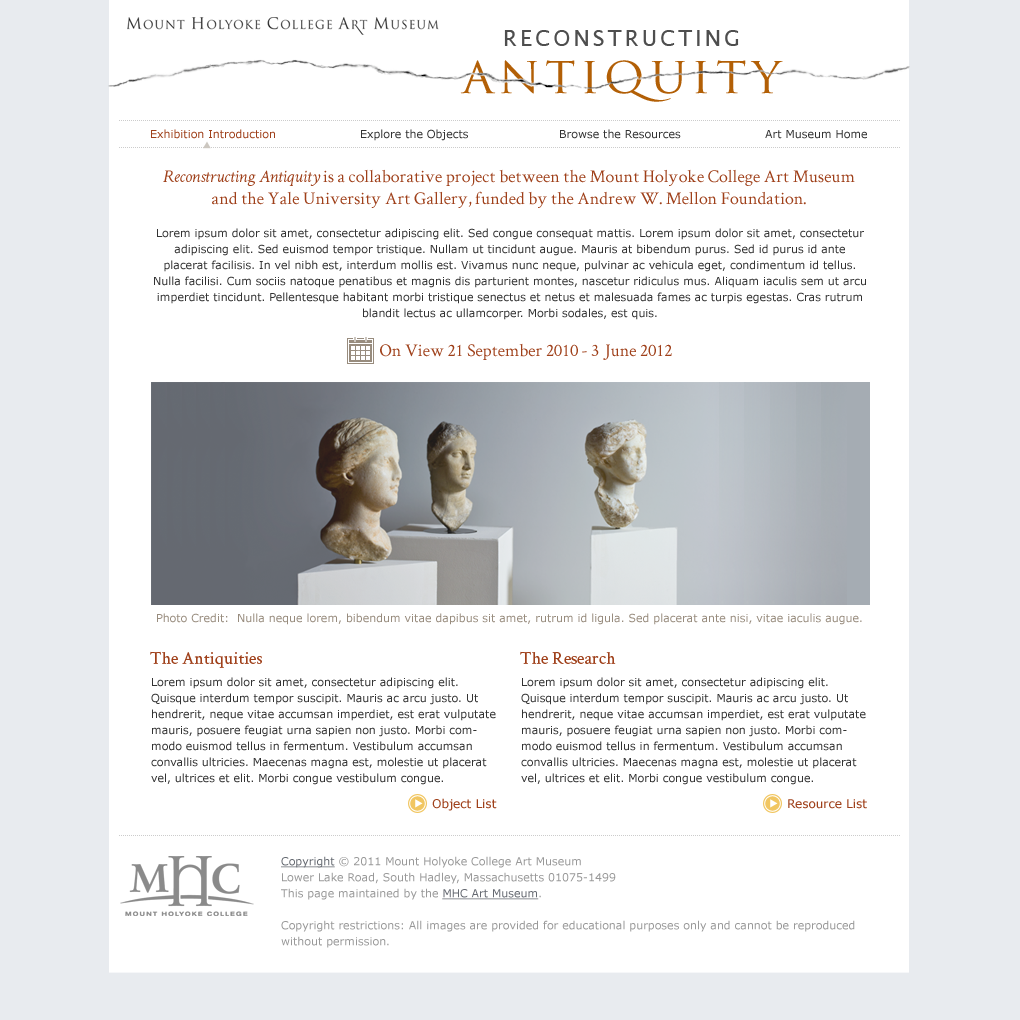
<style>
.page{position:relative;width:1020px;height:1020px;background:#ffffff}
.page>*{position:absolute;margin:0}
.t1{font:22px "LucidaSans";letter-spacing:0.14em;color:#4e4e4e;text-transform:uppercase}
.t2{font:50px "TrajanPro-Regular";letter-spacing:0.1em;color:#b25f06}
.t3{font:11px "Verdana";color:#9f401a}
.t4{font:11px "Verdana";color:#333333}
.t5{font:18px "CrimsonText-Roman";color:#9f401a}
.t6{font:18px "CrimsonText-Italic";color:#9f401a}
.t7{font:11px/16px "Verdana";color:#333333}
.t8{font:11px "Verdana";color:#988c7e}
.t9{font:12px "Verdana";color:#9f401a}
.t10{font:11px/16px "Verdana";color:#999999}
.t11{font:11px/16px "Verdana";color:#656a71;text-decoration:underline}
.t12{font:11px/16px "Verdana";color:#656971;text-decoration:underline}
</style>
<div class="page">
<p class="t1" style="left:504px;top:30px;width:235px;height:16px">reconstructing</p>
<p class="t2" style="left:460px;top:60px;width:323px;height:42px">antiquity</p>
<p class="t3" style="left:151px;top:129px;width:124px;height:10px">Exhibition Introduction</p>
<p class="t4" style="left:361px;top:129px;width:107px;height:12px">Explore the Objects</p>
<p class="t4" style="left:560px;top:129px;width:121px;height:10px">Browse the Resources</p>
<p class="t4" style="left:765px;top:130px;width:102px;height:9px">Art Museum Home</p>
<p class="t5" style="left:163px;top:169px;width:692px;height:39px;text-align:center"><span class="t6">Reconstructing Antiquity</span> is a collaborative project between the Mount Holyoke College Art Museum and the Yale University Art Gallery, funded by the Andrew W. Mellon Foundation.</p>
<p class="t7" style="left:154px;top:228px;width:712px;height:92px;text-align:center">Lorem ipsum dolor sit amet, consectetur adipiscing elit. Sed congue consequat mattis. Lorem ipsum dolor sit amet, consectetur adipiscing elit. Sed euismod tempor tristique. Nullam ut tincidunt augue. Mauris at bibendum purus. Sed id purus id ante placerat facilisis. In vel nibh est, interdum mollis est. Vivamus nunc neque, pulvinar ac vehicula eget, condimentum id tellus. Nulla facilisi. Cum sociis natoque penatibus et magnis dis parturient montes, nascetur ridiculus mus. Aliquam iaculis sem ut arcu imperdiet tincidunt. Pellentesque habitant morbi tristique senectus et netus et malesuada fames ac turpis egestas. Cras rutrum blandit lectus ac ullamcorper. Morbi sodales, est quis.</p>
<p class="t5" style="left:380px;top:343px;width:292px;height:17px">On View 21 September 2010 - 3 June 2012</p>
<p class="t8" style="left:157px;top:613px;width:705px;height:12px">Photo Credit:  Nulla neque lorem, bibendum vitae dapibus sit amet, rutrum id ligula. Sed placerat ante nisi, vitae iaculis augue.</p>
<p class="t5" style="left:150px;top:651px;width:112px;height:17px">The Antiquities</p>
<p class="t5" style="left:520px;top:651px;width:96px;height:13px">The Research</p>
<p class="t7" style="left:151px;top:677px;width:345px;height:108px">Lorem ipsum dolor sit amet, consectetur adipiscing elit. Quisque interdum tempor suscipit. Mauris ac arcu justo. Ut hendrerit, neque vitae accumsan imperdiet, est erat vulputate mauris, posuere feugiat urna sapien non justo. Morbi commodo euismod tellus in fermentum. Vestibulum accumsan convallis ultricies. Maecenas magna est, molestie ut placerat vel, ultrices et elit. Morbi congue vestibulum congue.</p>
<p class="t7" style="left:521px;top:677px;width:345px;height:108px">Lorem ipsum dolor sit amet, consectetur adipiscing elit. Quisque interdum tempor suscipit. Mauris ac arcu justo. Ut hendrerit, neque vitae accumsan imperdiet, est erat vulputate mauris, posuere feugiat urna sapien non justo. Morbi commodo euismod tellus in fermentum. Vestibulum accumsan convallis ultricies. Maecenas magna est, molestie ut placerat vel, ultrices et elit. Morbi congue vestibulum congue.</p>
<p class="t9" style="left:432px;top:798px;width:65px;height:13px">Object List</p>
<p class="t9" style="left:788px;top:799px;width:79px;height:10px">Resource List</p>
<p class="t10" style="left:281px;top:856px;width:574px;height:92px"><span class="t11">Copyright </span>© 2011 Mount Holyoke College Art Museum<br>Lower Lake Road, South Hadley, Massachusetts 01075-1499<br>This page maintained by the <span class="t12">MHC Art Museum</span>.<br><br>Copyright restrictions: All images are provided for educational purposes only and cannot be reproduced without permission.</p>
</div>
